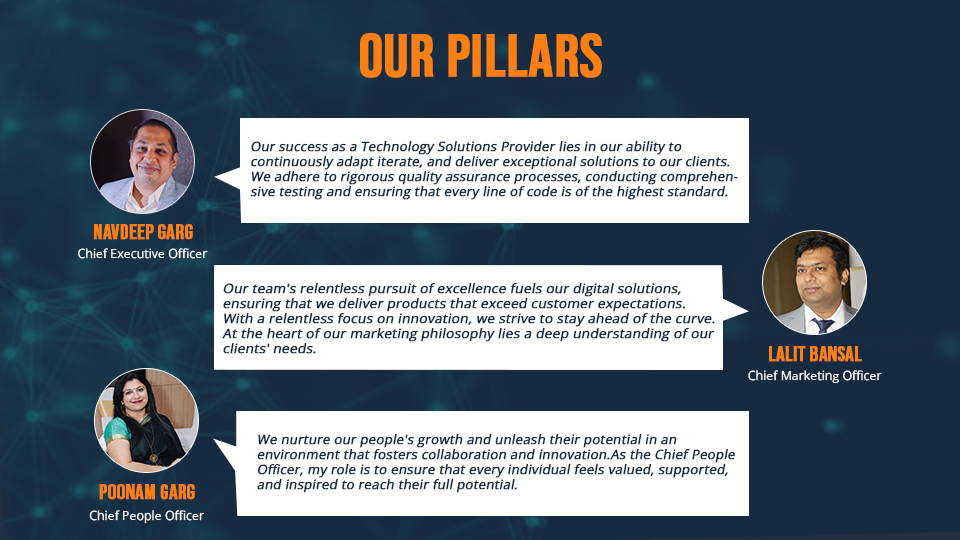
<style>
.page{position:relative;width:960px;height:540px;background:#172b40}
.page>*{position:absolute;margin:0}
.t1{font:60px "BebasNeue-Regular";color:#fb7f12;font-weight:bold}
.t2{font:13px/15px "OpenSans-Regular";color:#172b40;font-weight:bold;font-style:italic}
.t3{font:21px "BebasNeue-Regular";color:#fb7f12;font-weight:bold}
.t4{font:12.4px "OpenSans-Regular";color:#ffffff}
.t5{font:13px/15px "OpenSans-Regular";color:#172b40;font-weight:bold;font-style:italic;scale:1.03 1}
</style>
<div class="page">
<p class="t1" style="left:360px;top:33px;width:242px;height:45px">OUR PILLARS</p>
<p class="t2" style="left:250px;top:140px;width:488px;height:60px">Our success as a Technology Solutions Provider lies in our ability to <br>continuously adapt iterate, and deliver exceptional solutions to our clients.<br>We adhere to rigorous quality assurance processes, conducting comprehen-<br>sive testing and ensuring that every line of code is of the highest standard.</p>
<p class="t3" style="left:94px;top:224px;width:99px;height:16px">Navdeep Garg</p>
<p class="t4" style="left:78px;top:248px;width:130px;height:11px">Chief Executive Officer</p>
<p class="t5" style="left:222px;top:282px;width:493px;height:72px">Our team's relentless pursuit of excellence fuels our digital solutions, <br>ensuring that we deliver products that exceed customer expectations.<br>With a relentless focus on innovation, we strive to stay ahead of the curve.<br>At the heart of our marketing philosophy lies a deep understanding of our<br>clients' needs.</p>
<p class="t3" style="left:769px;top:346px;width:93px;height:16px">Lalit Bansal</p>
<p class="t4" style="left:748px;top:370px;width:134px;height:13px">Chief Marketing Officer</p>
<p class="t2" style="left:257px;top:433px;width:478px;height:60px">We nurture our people's growth and unleash their potential in an <br>environment that fosters collaboration and innovation.As the Chief People <br>Officer, my role is to ensure that every individual feels valued, supported,<br>and inspired to reach their full potential.</p>
<p class="t3" style="left:99px;top:484px;width:96px;height:16px">Poonam Garg</p>
<p class="t4" style="left:89px;top:510px;width:116px;height:14px">Chief People Officer</p>
</div>
